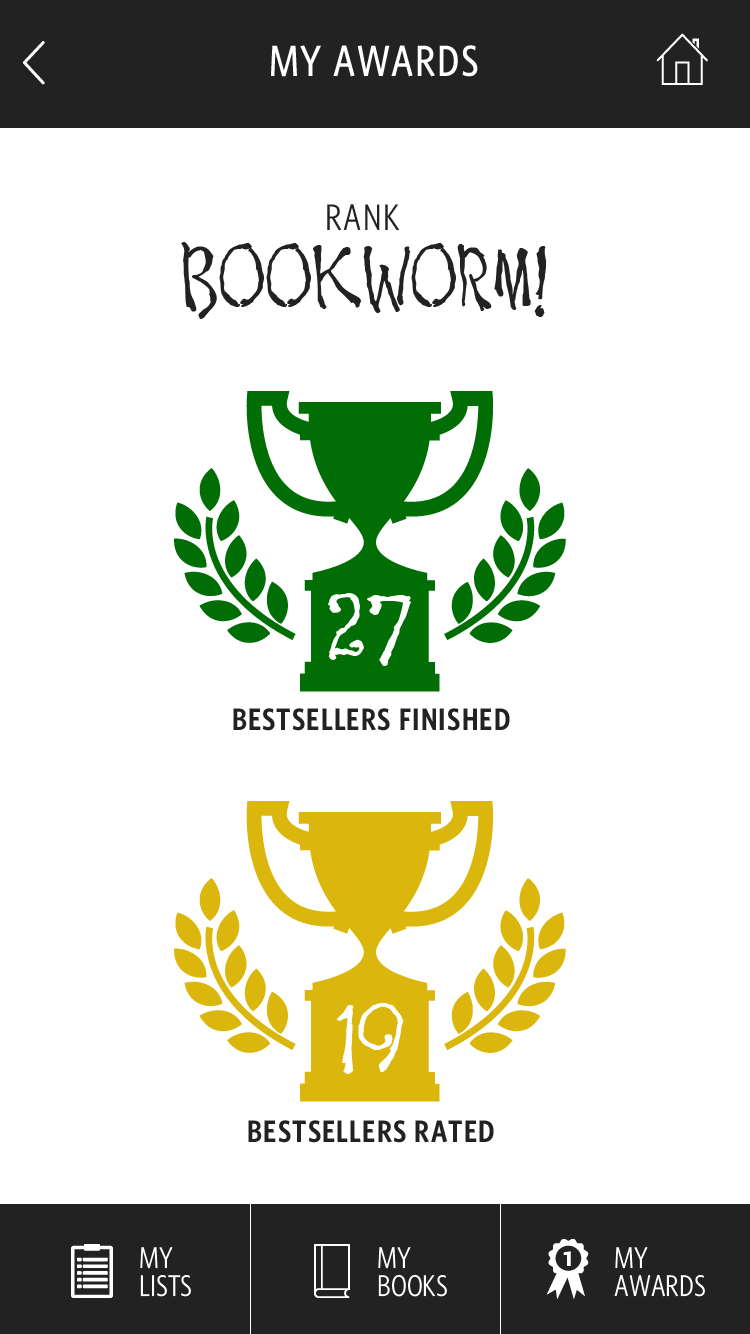
<style>
.page{position:relative;width:750px;height:1334px;background:#ffffff}
.page>*{position:absolute;margin:0}
.t1{font:44px "WhitneyCondensed-Medium";letter-spacing:0.04em;color:#ffffff}
.t2{font:100px/91px "WakingtheWitch";letter-spacing:0.04em;color:#222222}
.t3{font:37px/91px "WhitneyCondensed-Book";letter-spacing:0.04em;color:#222222}
.t4{font:117.6px "WakingtheWitch";letter-spacing:0.04em;color:#ffffff}
.t5{font:31.1px "WhitneyCondensed-Semibold";letter-spacing:0.04em;color:#222222}
.t6{font:30px/28px "WhitneyCondensed-Book";color:#ffffff}
</style>
<div class="page">
<p class="t1" style="left:271px;top:45px;width:207px;height:32px">MY AWARDS</p>
<p class="t2" style="left:181px;top:204px;width:366px;height:115px;text-align:center"><span class="t3">RANK<br></span>BOOKWORM!</p>
<p class="t4" style="left:328px;top:593px;width:83px;height:73px">27</p>
<p class="t5" style="left:233px;top:708px;width:277px;height:23px">BESTSELLERS FINISHED</p>
<p class="t4" style="left:336px;top:1003px;width:68px;height:71px">19</p>
<p class="t5" style="left:248px;top:1120px;width:246px;height:23px">BESTSELLERS RATED</p>
<p class="t6" style="left:140px;top:1247px;width:51px;height:50px">MY<br>LISTS</p>
<p class="t6" style="left:378px;top:1247px;width:69px;height:50px">MY<br>BOOKS</p>
<p class="t6" style="left:614px;top:1247px;width:91px;height:50px">MY<br>AWARDS</p>
</div>
